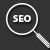
<style>
.page{position:relative;width:50px;height:50px;background:#333333}
.page>*{position:absolute;margin:0}
.t1{font:10px "MyriadPro-Bold";color:#ffffff}
</style>
<div class="page">
<p class="t1" style="left:13px;top:15px;width:18px;height:7px">SEO</p>
</div>
